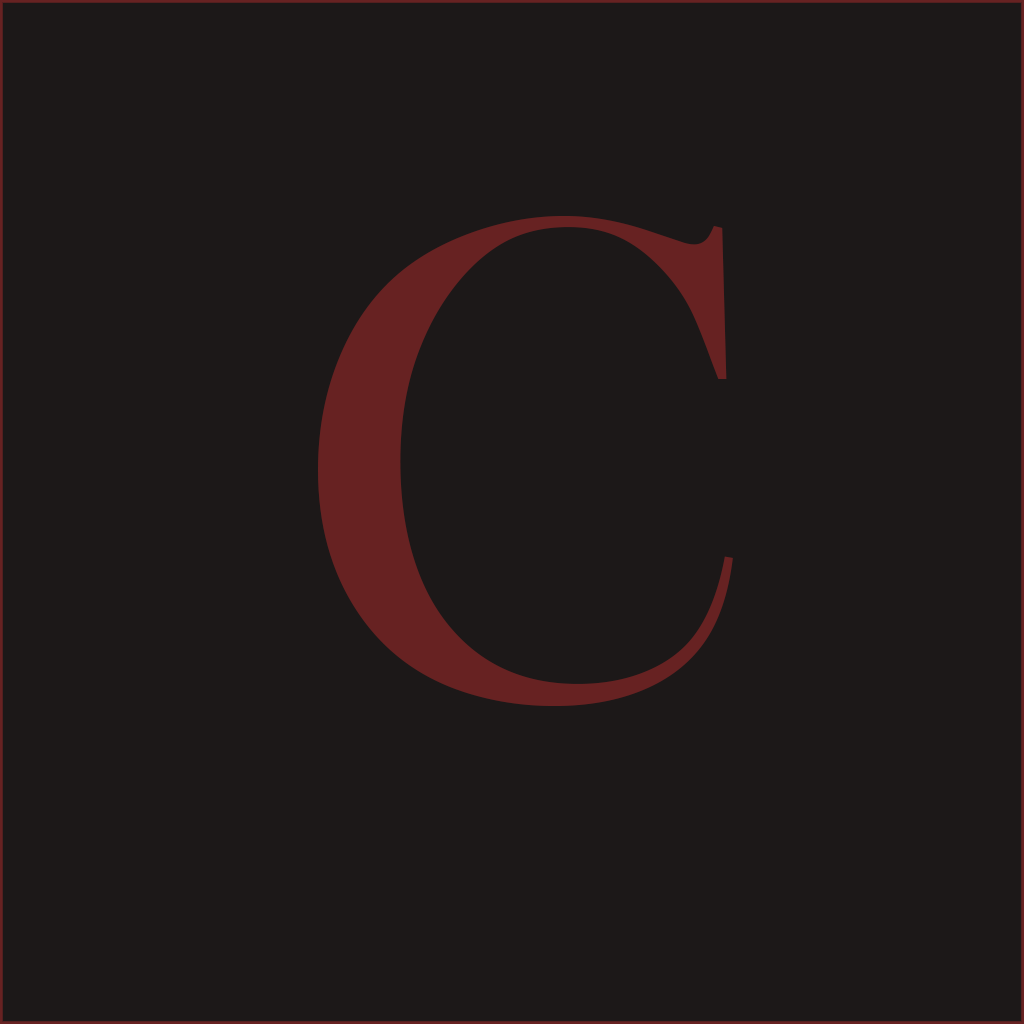
<style>
.page{position:relative;width:1024px;height:1024px;background:#1c1818}
.page>*{position:absolute;margin:0}
.t1{font:700px "BaskOldFace";color:#672222}
</style>
<div class="page">
<p class="t1" style="left:318px;top:215px;width:415px;height:491px">C</p>
</div>
